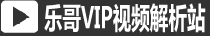
<style>
.page{position:relative;width:210px;height:36px;background:#333333}
.page>*{position:absolute;margin:0}
.t1{font:29.4px "MicrosoftYaHei-Bold";color:#ffffff;scale:0.63 1}
</style>
<div class="page">
<p class="t1" style="left:44px;top:3px;width:162px;height:30px">乐哥VIP视频解析站</p>
</div>
